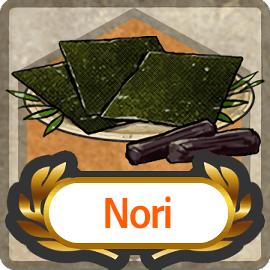
<style>
.page{position:relative;width:270px;height:270px}
.page>*{position:absolute;margin:0}
.t1{font:45px "AdobeClean-Bold";letter-spacing:-0.04em;color:#ff5d00;scale:0.9 1}
</style>
<div class="page">
<p class="t1" style="left:105px;top:196px;width:66px;height:33px">Nori</p>
</div>
